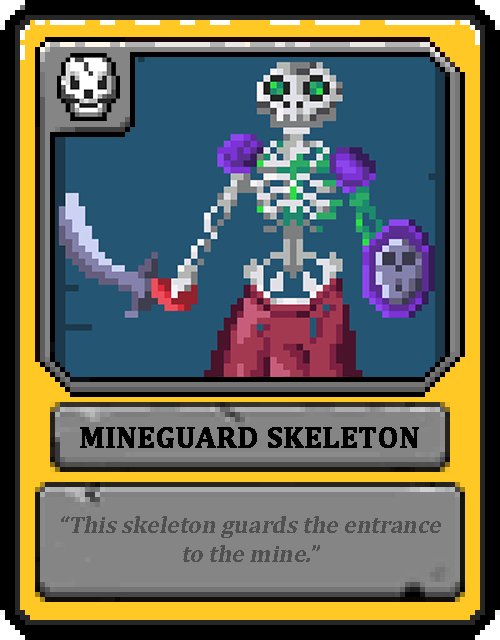
<style>
.page{position:relative;width:500px;height:640px;background:#245674}
.page>*{position:absolute;margin:0}
.t1{font:30px "Cambria-Bold";color:#000000;text-transform:uppercase;font-weight:bold}
.t2{font:24px "Cambria-Bold";color:#505050;font-style:italic}
</style>
<div class="page">
<p class="t1" style="left:80px;top:427px;width:339px;height:21px">MineGuard Skeleton</p>
<p class="t2" style="left:61px;top:516px;width:380px;height:46px;text-align:center">“This skeleton guards the entrance to the mine.”</p>
</div>
